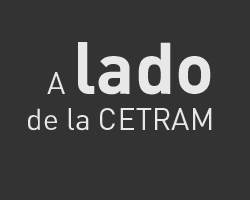
<style>
.page{position:relative;width:250px;height:200px;background:#333333}
.page>*{position:absolute;margin:0}
.t1{font:30px "DINPro";color:#e8e8e8}
.t2{font:72px "DINPro-Bold";color:#e8e8e8}
</style>
<div class="page">
<p class="t1" style="left:28px;top:42px;width:184px;height:89px;text-align:right">A <span class="t2">lado<br></span>de la CETRAM</p>
</div>
